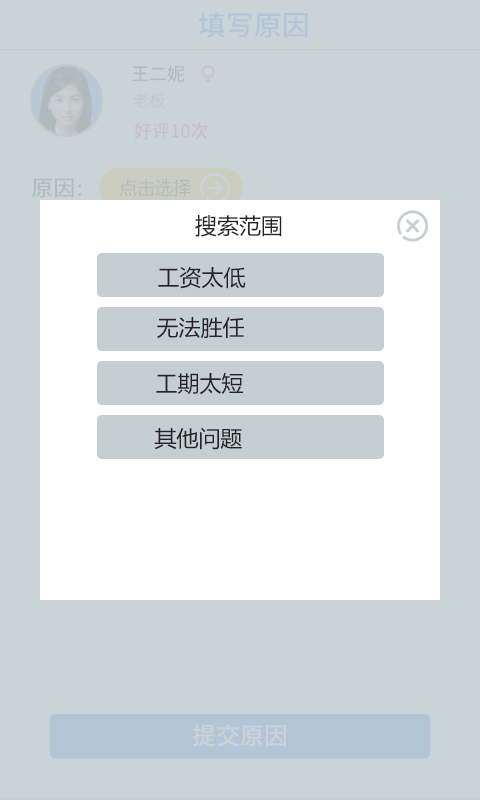
<style>
.page{position:relative;width:480px;height:800px;background:#cad3d8}
.page>*{position:absolute;margin:0}
.t1{font:28px "NotoSansHans-Medium";color:#b3c6d8}
.t2{font:18.3px "NotoSansHans-Medium";color:#b3bbc0}
.t3{font:16px "NotoSansHans-Medium";color:#c0c9cd}
.t4{font:18px "NotoSansHans-Medium";color:#cabec5}
.t5{font:22px "NotoSansHans-Medium";color:#b3bbc0}
.t6{font:18px "NotoSansHans-Medium";color:#b3bbc0}
.t7{font:22px "MicrosoftYaHei";color:#252323}
.t8{font:24px "NotoSansHans-Medium";color:#cad3d8}
</style>
<div class="page">
<p class="t1" style="left:198px;top:12px;width:110px;height:26px">填写原因</p>
<p class="t2" style="left:132px;top:65px;width:53px;height:17px">王二妮</p>
<p class="t3" style="left:133px;top:93px;width:32px;height:15px">老板</p>
<p class="t4" style="left:134px;top:122px;width:74px;height:18px">好评10次</p>
<p class="t5" style="left:32px;top:178px;width:50px;height:20px">原因<span class="t6">：</span></p>
<p class="t7" style="left:195px;top:215px;width:87px;height:22px">搜索范围</p>
<p class="t7" style="left:158px;top:266px;width:88px;height:23px">工资太低</p>
<p class="t7" style="left:157px;top:317px;width:87px;height:22px">无法胜任</p>
<p class="t7" style="left:156px;top:372px;width:87px;height:23px">工期太短</p>
<p class="t7" style="left:154px;top:427px;width:88px;height:23px">其他问题</p>
<p class="t8" style="left:192px;top:724px;width:94px;height:23px">提交原因</p>
</div>
